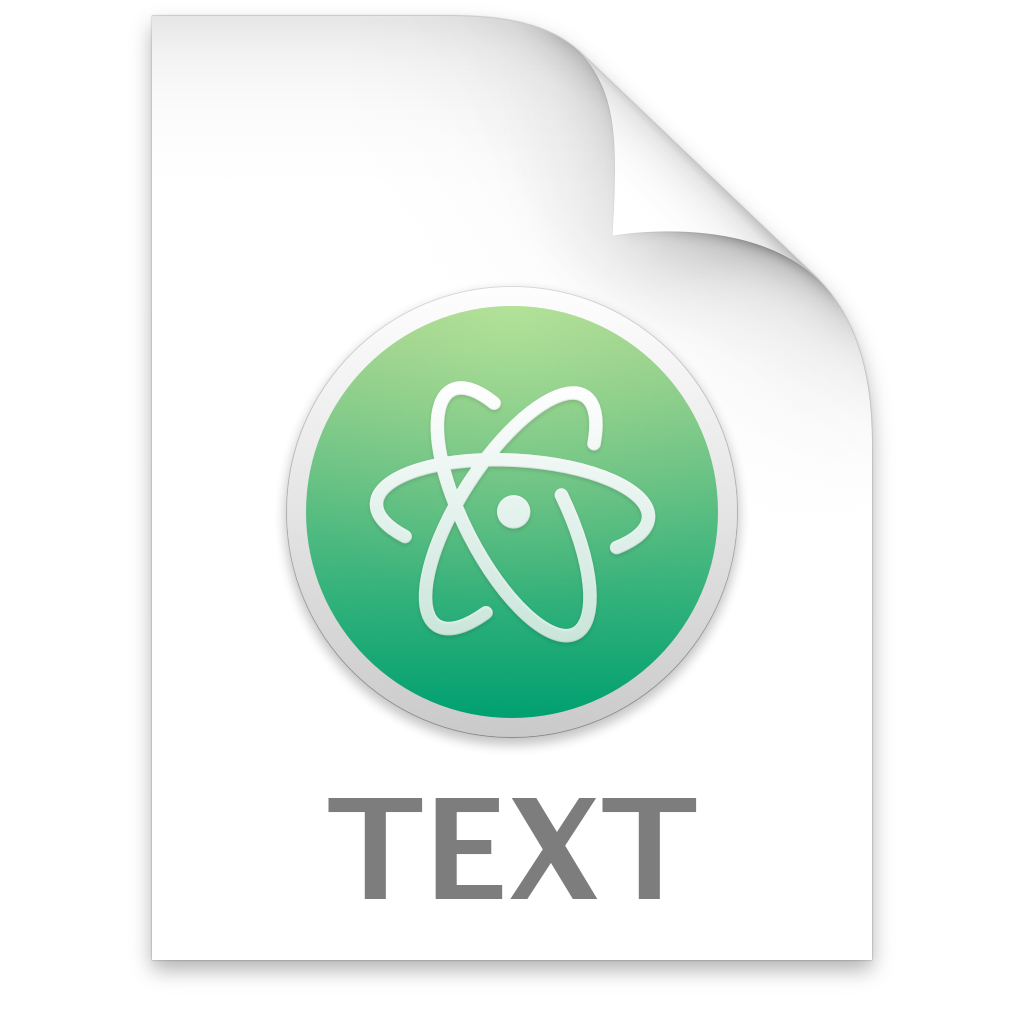
<style>
.page{position:relative;width:1024px;height:1024px;background:#ffffff}
.page>*{position:absolute;margin:0}
.t1{font:140px "LucidaGrande-Bold";color:#7d7d7d}
</style>
<div class="page">
<p class="t1" style="left:328px;top:798px;width:369px;height:101px">TEXT</p>
</div>
